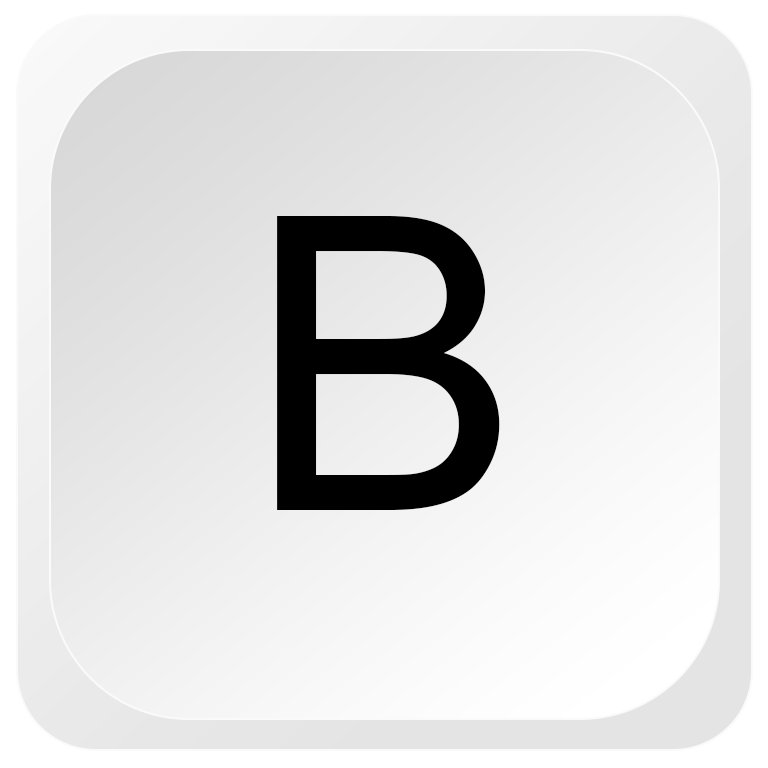
<style>
.page{position:relative;width:768px;height:768px}
.page>*{position:absolute;margin:0}
.t1{font:411px "ArialMT";color:#000000}
</style>
<div class="page">
<p class="t1" style="left:277px;top:216px;width:223px;height:294px">B</p>
</div>
